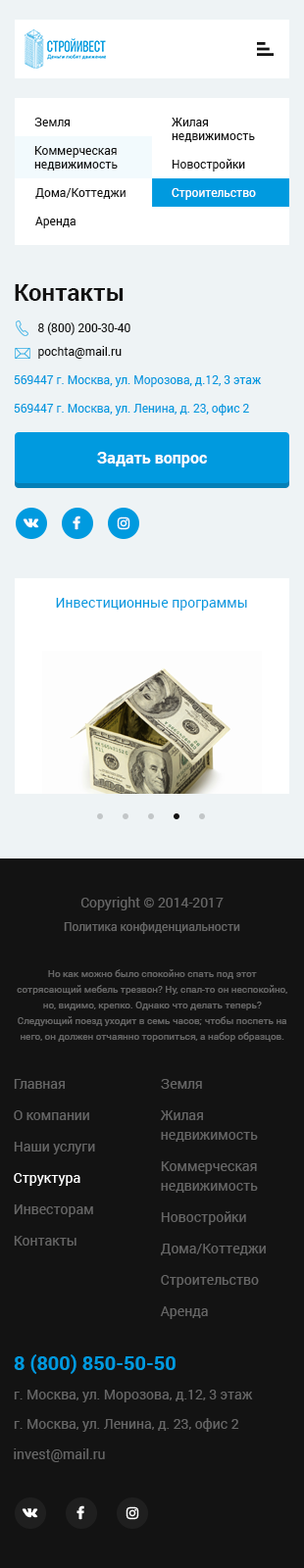
<style>
.page{position:relative;width:304px;height:1568px;background:#131313}
.page>*{position:absolute;margin:0}
.t1{font:11.8px "Roboto-Regular";color:#131313}
.t2{font:11.8px/13.7px "Roboto-Regular";color:#131313}
.t3{font:11.8px "Roboto-Regular";color:#ffffff}
.t4{font:23.5px "Roboto-Bold";color:#131313}
.t5{font:11.8px "Roboto-Regular";color:#009adf}
.t6{font:15.7px "Roboto-Bold";color:#ffffff}
.t7{font:13.7px "Roboto-Regular";color:#009adf}
.t8{font:13.7px "Roboto-Regular";color:#666666}
.t9{font:11.8px "Roboto-Regular";color:#666666}
.t10{font:9.8px/15.7px "Roboto-Regular";color:#666666}
.t11{font:13.7px/31.4px "Roboto-Regular";color:#666666}
.t12{font:13.7px/31.4px "Roboto-Regular";color:#ffffff}
.t13{font:13.7px/19.6px "Roboto-Regular";color:#666666}
.t14{font:19.6px "Roboto-Bold";color:#009adf;text-transform:uppercase}
</style>
<div class="page">
<p class="t1" style="left:34px;top:118px;width:36px;height:8px">Земля</p>
<p class="t2" style="left:172px;top:118px;width:83px;height:24px">Жилая<br>недвижимость</p>
<p class="t2" style="left:34px;top:146px;width:84px;height:25px">Коммерческая<br>недвижимость</p>
<p class="t1" style="left:172px;top:159px;width:73px;height:13px">Новостройки</p>
<p class="t1" style="left:35px;top:188px;width:90px;height:11px">Дома/Коттеджи</p>
<p class="t3" style="left:172px;top:188px;width:84px;height:12px">Строительство</p>
<p class="t1" style="left:35px;top:217px;width:40px;height:11px">Аренда</p>
<p class="t4" style="left:15px;top:284px;width:108px;height:17px">Контакты</p>
<p class="t1" style="left:38px;top:322px;width:92px;height:13px">8 (800) 200-30-40</p>
<p class="t1" style="left:38px;top:346px;width:84px;height:13px">pochta@mail.ru</p>
<p class="t5" style="left:14px;top:375px;width:248px;height:12px">569447 г. Москва, ул. Морозова, д.12, 3 этаж</p>
<p class="t5" style="left:14px;top:404px;width:235px;height:12px">569447 г. Москва, ул. Ленина, д. 23, офис 2</p>
<p class="t6" style="left:97px;top:452px;width:110px;height:15px">Задать вопрос</p>
<p class="t7" style="left:56px;top:598px;width:191px;height:13px">Инвестиционные программы</p>
<p class="t8" style="left:80px;top:897px;width:143px;height:13px">Copyright © 2014-2017</p>
<p class="t9" style="left:64px;top:922px;width:176px;height:12px">Политика конфиденциальности</p>
<p class="t10" style="left:17px;top:969px;width:270px;height:73px;text-align:center">Но как можно было спокойно спать под этот сотрясающий мебель трезвон? Ну, спал-то он неспокойно, но, видимо, крепко. Однако что делать теперь? Следующий поезд уходит в семь часов; чтобы поспеть на него, он должен отчаянно торопиться, а набор образцов.</p>
<p class="t11" style="left:14px;top:1079px;width:81px;height:167px">Главная<br>О компании<br>Наши услуги<br><span class="t12">Структура<br></span>Инвесторам<br>Контакты</p>
<p class="t11" style="left:160px;top:1079px;width:106px;height:240px">Земля<br>Жилая<br><span class="t13">недвижимость<br></span>Коммерческая<br><span class="t13">недвижимость<br></span>Новостройки<br>Дома/Коттеджи<br>Строительство<br>Аренда</p>
<p class="t14" style="left:14px;top:1354px;width:161px;height:20px">8 (800) 850-50-50</p>
<p class="t8" style="left:14px;top:1390px;width:239px;height:12px">г. Москва, ул. Морозова, д.12, 3 этаж</p>
<p class="t8" style="left:14px;top:1418px;width:225px;height:14px">г. Москва, ул. Ленина, д. 23, офис 2</p>
<p class="t8" style="left:14px;top:1448px;width:91px;height:14px">invest@mail.ru</p>
</div>
